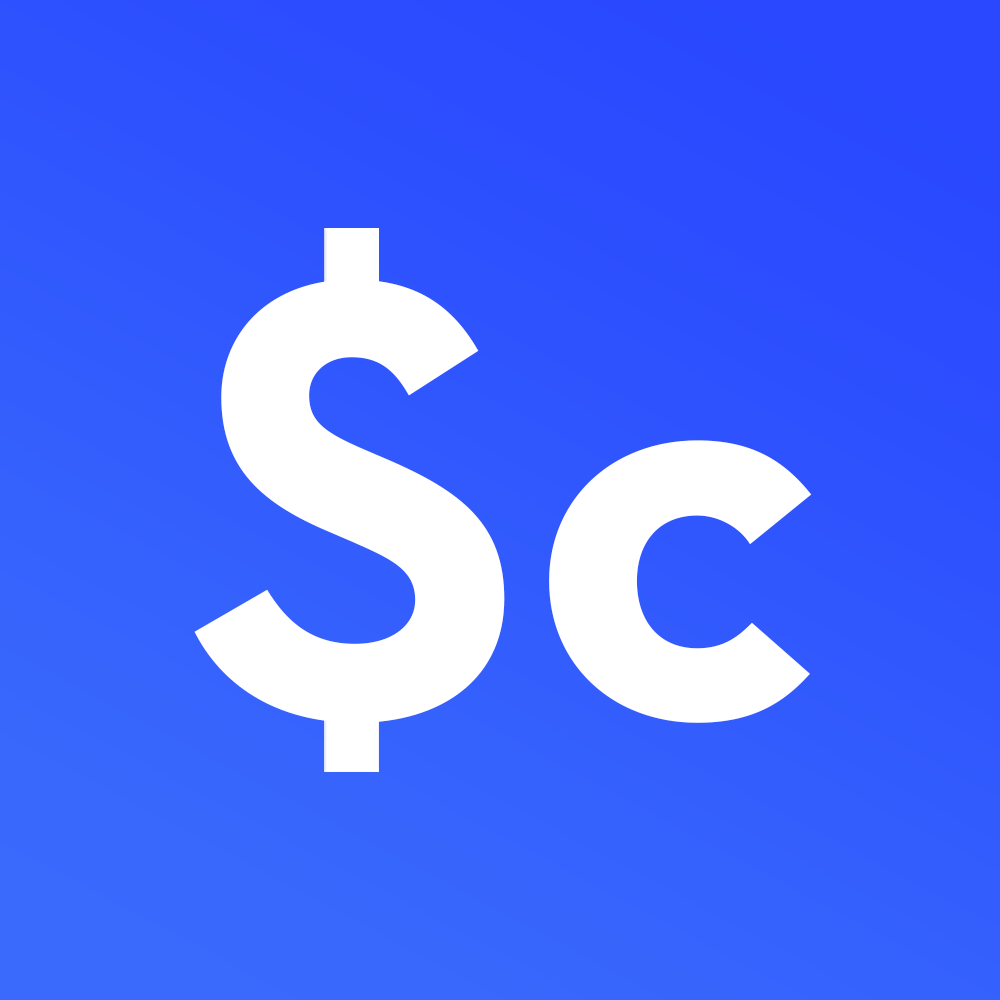
<style>
.page{position:relative;width:1000px;height:1000px}
.page>*{position:absolute;margin:0}
.t1{font:635.7px "NeutraText-Bold";letter-spacing:-0.005em;color:#ffffff}
</style>
<div class="page">
<p class="t1" style="left:194px;top:279px;width:618px;height:444px">Sc</p>
</div>
